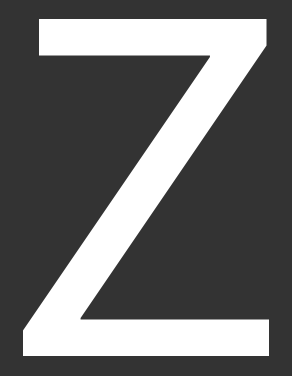
<style>
.page{position:relative;width:292px;height:376px;background:#333333}
.page>*{position:absolute;margin:0}
.t1{font:500px "MyriadPro-Regular";color:#ffffff}
</style>
<div class="page">
<p class="t1" style="left:23px;top:19px;width:246px;height:337px">Z</p>
</div>
